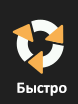
<style>
.page{position:relative;width:78px;height:104px;background:#202020}
.page>*{position:absolute;margin:0}
.t1{font:12px "Calibri-Bold";color:#ffffff}
</style>
<div class="page">
<p class="t1" style="left:17px;top:82px;width:50px;height:14px">Быстро</p>
</div>
